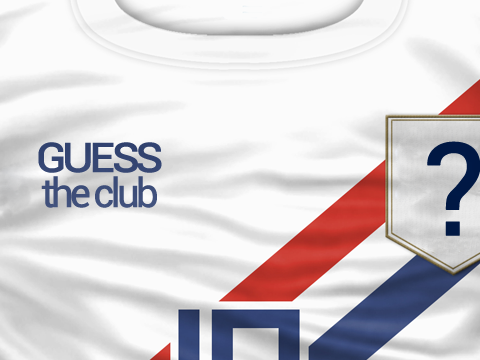
<style>
.page{position:relative;width:480px;height:360px;background:#fbfbfb}
.page>*{position:absolute;margin:0}
.t1{font:40px/35px "Roboto-Regular";letter-spacing:-0.12em;color:#374875;font-weight:bold}
.t2{font:51px/46px "Roboto-Regular";letter-spacing:-0.12em;color:#374875;font-variant:small-caps;font-weight:bold}
.t3{font:129px "Roboto-Regular";letter-spacing:-0.1em;color:#001844;font-weight:bold}
</style>
<div class="page">
<p class="t1" style="left:38px;top:142px;width:124px;height:66px;text-align:center"><span class="t2">guess<br></span>the club</p>
<p class="t3" style="left:427px;top:141px;width:54px;height:95px">?</p>
</div>
